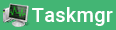
<style>
.page{position:relative;width:116px;height:30px;background:#43b574}
.page>*{position:absolute;margin:0}
.t1{font:20px "Roboto-Medium";color:#ffffff}
</style>
<div class="page">
<p class="t1" style="left:32px;top:7px;width:81px;height:19px">Taskmgr</p>
</div>
